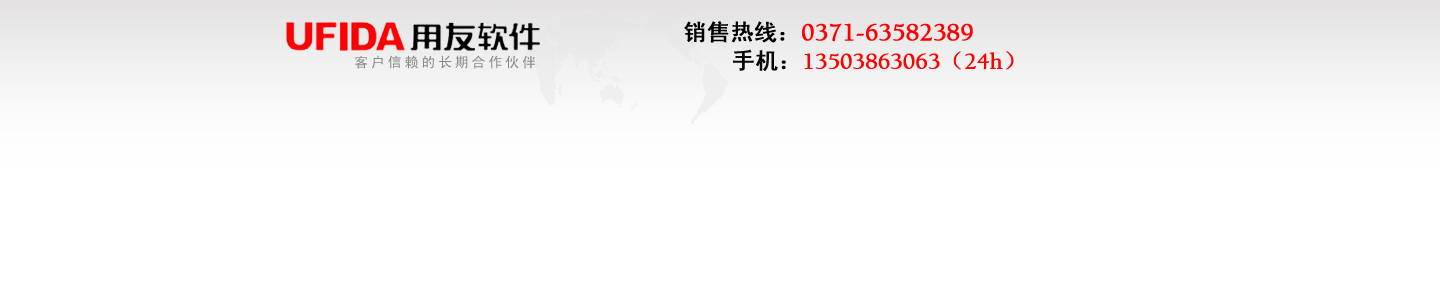
<style>
.page{position:relative;width:1440px;height:300px;background:#ffffff}
.page>*{position:absolute;margin:0}
.t1{font:25px/30px "Balaram";color:#ff0000;font-weight:bold}
.t2{font:23px/30px "SimHei";color:#000000;font-weight:bold}
.t3{font:23px/30px "SimHei";color:#ff0000;font-weight:bold}
.t4{font:23px/30px "SimHei";color:#070707;font-weight:bold}
.t5{font:23px/30px "Balaram";color:#ff0000;font-weight:bold}
.t6{font:14px "SimHei";letter-spacing:0.2em;color:#8a8888}
</style>
<div class="page">
<p class="t1" style="left:684px;top:21px;width:330px;height:50px"><span class="t2">销售热线：</span>0371-63582389<span class="t3">  <br>   </span><span class="t4"> 手机：</span><span class="t5">13503863063</span><span class="t3">（</span><span class="t5">24h</span><span class="t3">）</span></p>
<p class="t6" style="left:355px;top:55px;width:180px;height:14px">客户信赖的长期合作伙伴</p>
</div>
